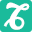
<style>
.page{position:relative;width:32px;height:32px;background:#1abb9b}
.page>*{position:absolute;margin:0}
.t1{font:36px "OleoScriptSwashCaps-Regular";color:#ffffff}
</style>
<div class="page">
<p class="t1" style="left:3px;top:2px;width:27px;height:28px">T</p>
</div>
